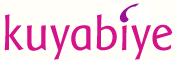
<style>
.page{position:relative;width:178px;height:60px;background:#fffef8}
.page>*{position:absolute;margin:0}
.t1{font:48.9px "BaarSophia";color:#d51289}
</style>
<div class="page">
<p class="t1" style="left:4px;top:14px;width:169px;height:46px">kuyabiye</p>
</div>
